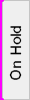
<style>
.page{position:relative;width:30px;height:100px;background:#efefef}
.page>*{position:absolute;margin:0}
.t1{font:15px "MS Sans Serif";color:#000000}
</style>
<div class="page">
<p class="t1" style="left:9px;top:26px;width:13px;height:54px;rotate:-90deg">On Hold</p>
</div>
